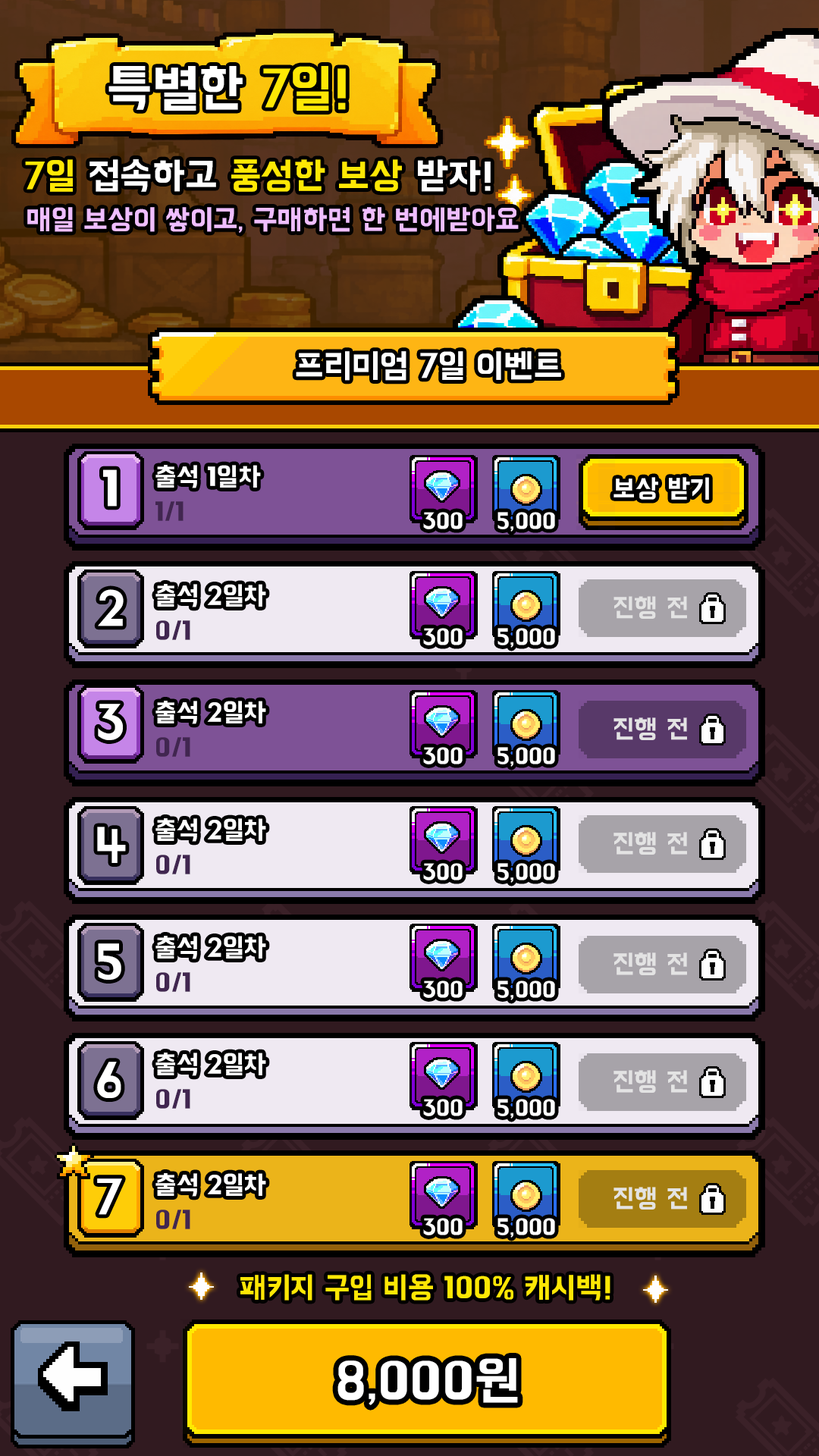
<style>
.page{position:relative;width:819px;height:1456px}
.page>*{position:absolute;margin:0}
.t1{font:53.1px "BMHANNAProOTF";color:#ffffff}
.t2{font:53.1px "BMHANNAProOTF";color:#fee805}
.t3{font:37.9px "BMHANNAProOTF";color:#fee805}
.t4{font:37.9px "BMHANNAProOTF";color:#ffffff}
.t5{font:28.8px "BMHANNAProOTF";color:#efbeff}
.t6{font:34.1px "BMHANNAProOTF";color:#ffffff}
.t7{font:49.3px "BMHANNAProOTF";color:#ffffff}
.t8{font:26.5px "BMHANNAProOTF";color:#ffffff}
.t9{font:26.5px "BMHANNAProOTF";color:#412650}
.t10{font:22.7px "BMHANNAProOTF";color:#ffffff}
.t11{font:48.9px "BMHANNAProOTF";color:#ffffff}
.t12{font:26.5px "BMHANNAProOTF";color:#e3e3e3}
.t13{font:30.3px "BMHANNAProOTF";color:#fde705}
</style>
<div class="page">
<p class="t1" style="left:108px;top:66px;width:238px;height:45px">특별한 <span class="t2">7일!</span></p>
<p class="t3" style="left:25px;top:159px;width:466px;height:33px">7일 <span class="t4">접속하고 </span>풍성한 보상<span class="t4"> 받자!</span></p>
<p class="t5" style="left:27px;top:207px;width:492px;height:26px">매일 보상이 쌓이고, 구매하면 한 번에받아요</p>
<p class="t6" style="left:296px;top:351px;width:265px;height:30px">프리미엄 7일 이벤트</p>
<p class="t7" style="left:103px;top:469px;width:14px;height:38px">1</p>
<p class="t8" style="left:155px;top:465px;width:106px;height:23px">출석 1일차</p>
<p class="t8" style="left:613px;top:477px;width:96px;height:23px">보상 받기</p>
<p class="t9" style="left:155px;top:501px;width:29px;height:20px">1/1</p>
<p class="t10" style="left:423px;top:512px;width:40px;height:17px">300</p>
<p class="t10" style="left:497px;top:512px;width:58px;height:20px">5,000</p>
<p class="t11" style="left:98px;top:589px;width:26px;height:37px">2</p>
<p class="t8" style="left:155px;top:584px;width:111px;height:23px">출석 2일차</p>
<p class="t12" style="left:613px;top:596px;width:74px;height:23px">진행 전</p>
<p class="t9" style="left:156px;top:620px;width:34px;height:20px">0/1</p>
<p class="t10" style="left:423px;top:628px;width:40px;height:17px">300</p>
<p class="t10" style="left:497px;top:628px;width:58px;height:20px">5,000</p>
<p class="t8" style="left:155px;top:701px;width:111px;height:23px">출석 2일차</p>
<p class="t11" style="left:98px;top:704px;width:25px;height:36px">3</p>
<p class="t9" style="left:156px;top:737px;width:34px;height:20px">0/1</p>
<p class="t10" style="left:423px;top:747px;width:40px;height:17px">300</p>
<p class="t10" style="left:497px;top:747px;width:58px;height:20px">5,000</p>
<p class="t8" style="left:155px;top:818px;width:111px;height:24px">출석 2일차</p>
<p class="t11" style="left:97px;top:827px;width:29px;height:36px">4</p>
<p class="t9" style="left:156px;top:855px;width:34px;height:19px">0/1</p>
<p class="t8" style="left:155px;top:936px;width:111px;height:23px">출석 2일차</p>
<p class="t11" style="left:98px;top:943px;width:23px;height:37px">5</p>
<p class="t9" style="left:156px;top:972px;width:34px;height:20px">0/1</p>
<p class="t11" style="left:97px;top:1062px;width:24px;height:36px">6</p>
<p class="t8" style="left:155px;top:1053px;width:111px;height:23px">출석 2일차</p>
<p class="t9" style="left:156px;top:1089px;width:34px;height:20px">0/1</p>
<p class="t11" style="left:97px;top:1178px;width:25px;height:37px">7</p>
<p class="t8" style="left:155px;top:1173px;width:111px;height:24px">출석 2일차</p>
<p class="t9" style="left:156px;top:1210px;width:34px;height:19px">0/1</p>
<p class="t13" style="left:240px;top:1274px;width:370px;height:27px">패키지 구입 비용 100% 캐시백!</p>
<p class="t1" style="left:337px;top:1358px;width:181px;height:47px">8,000원</p>
</div>
